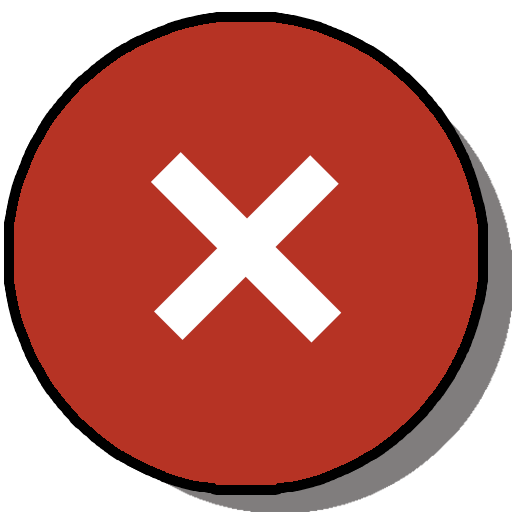
<style>
.page{position:relative;width:512px;height:512px;background:#b63324}
.page>*{position:absolute;margin:0}
.t1{font:426.4px "MyriadPro-Bold";color:#ffffff}
</style>
<div class="page">
<p class="t1" style="left:151px;top:152px;width:191px;height:191px;rotate:135deg">+</p>
</div>
